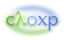
<style>
.page{position:relative;width:64px;height:40px;background:#ffffff}
.page>*{position:absolute;margin:0}
.t1{font:19.9px "Optima-Regular";color:#5981d8}
.t2{font:19.9px "Optima-Regular";color:#5fb32e}
.t3{font:19.9px "Symbol";color:#92dc49}
.t4{font:19.9px "Optima-Regular";color:#95b9ff}
</style>
<div class="page">
<p class="t1" style="left:6px;top:11px;width:52px;height:19px"><span class="t2">c</span><span class="t3">l</span><span class="t4">o</span>xp</p>
</div>
